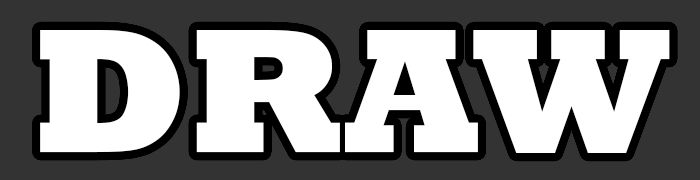
<style>
.page{position:relative;width:700px;height:180px;background:#ffffff}
.page>*{position:absolute;margin:0}
.t1{font:180px "Rockwell-ExtraBold";color:#ffffff}
</style>
<div class="page">
<p class="t1" style="left:40px;top:30px;width:630px;height:123px">DRAW</p>
</div>
